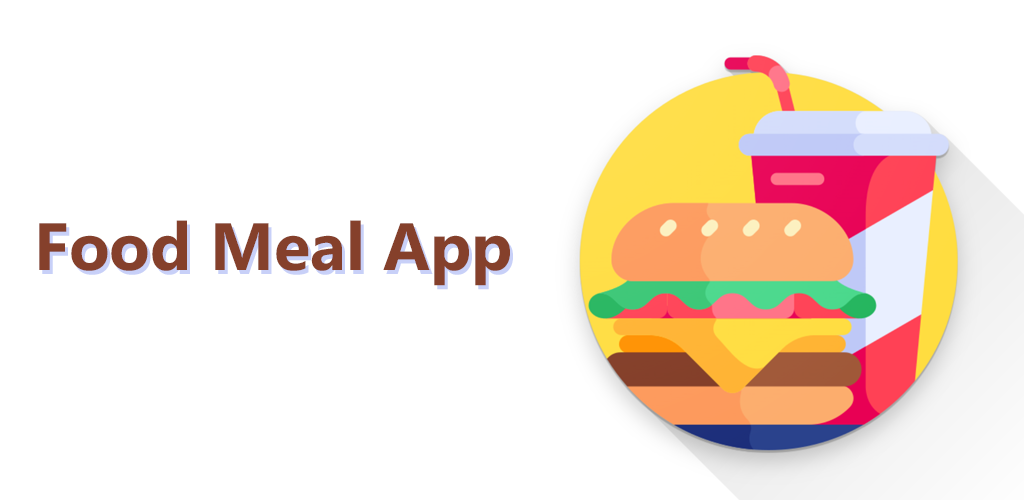
<style>
.page{position:relative;width:1024px;height:500px;background:#ffffff}
.page>*{position:absolute;margin:0}
.t1{font:66.7px "MicrosoftPhagsPa-Bold";color:#85402b}
</style>
<div class="page">
<p class="t1" style="left:39px;top:220px;width:471px;height:66px">Food Meal App</p>
</div>
